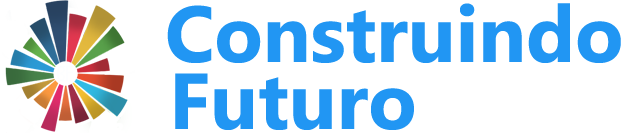
<style>
.page{position:relative;width:624px;height:133px;background:#ffffff}
.page>*{position:absolute;margin:0}
.t1{font:79.2px "MicrosoftPhagsPa-Bold";color:#2196f3}
</style>
<div class="page">
<p class="t1" style="left:167px;top:3px;width:454px;height:60px">Construindo</p>
<p class="t1" style="left:175px;top:73px;width:239px;height:57px">Futuro</p>
</div>
